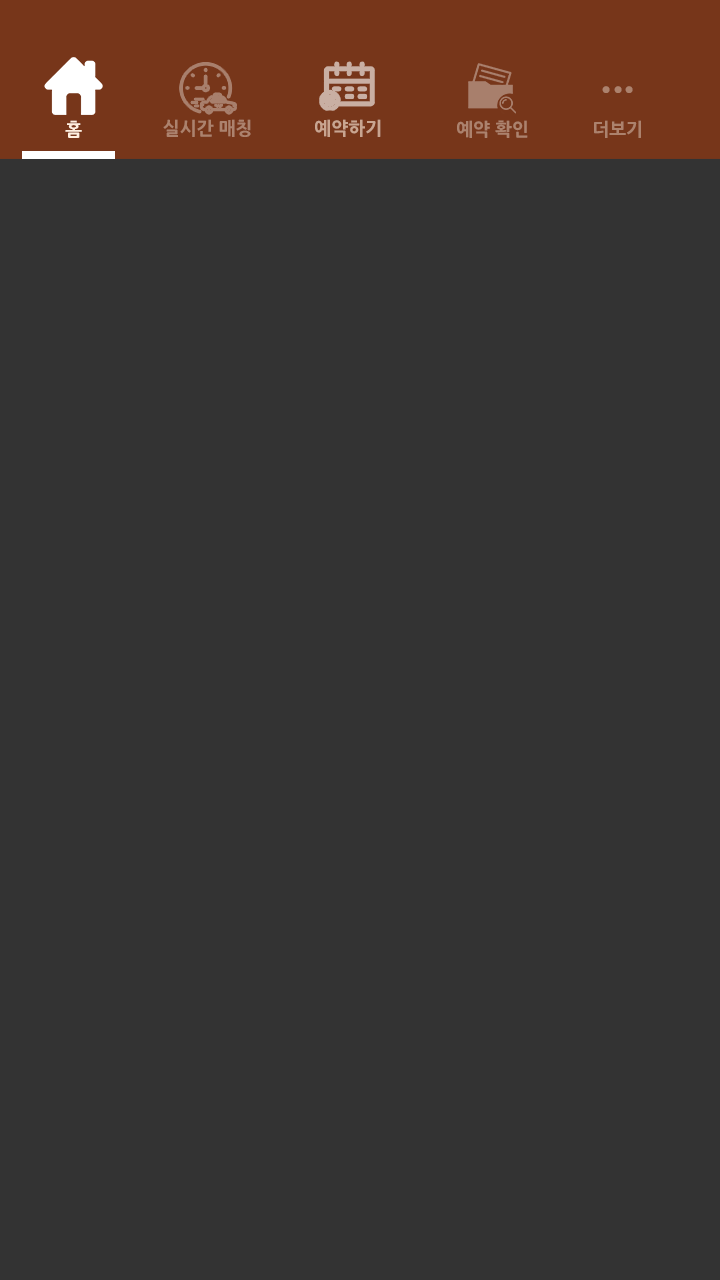
<style>
.page{position:relative;width:720px;height:1280px;background:#333333}
.page>*{position:absolute;margin:0}
.t1{font:38.2px "NanumGothicExtraBold";color:#ac826d}
.t2{font:17.9px "NanumGothicExtraBold";color:#ffefdf}
.t3{font:17.9px "NanumGothicExtraBold";color:#ac826d}
.t4{font:17.9px "NanumGothicExtraBold";color:#c9a590}
</style>
<div class="page">
<p class="t1" style="left:602px;top:86px;width:31px;height:7px">...</p>
<p class="t2" style="left:65px;top:120px;width:17px;height:18px">홈</p>
<p class="t3" style="left:163px;top:119px;width:88px;height:18px">실시간 매칭</p>
<p class="t4" style="left:315px;top:119px;width:66px;height:18px">예약하기</p>
<p class="t3" style="left:457px;top:120px;width:71px;height:18px">예약 확인</p>
<p class="t3" style="left:594px;top:120px;width:47px;height:18px">더보기</p>
</div>
